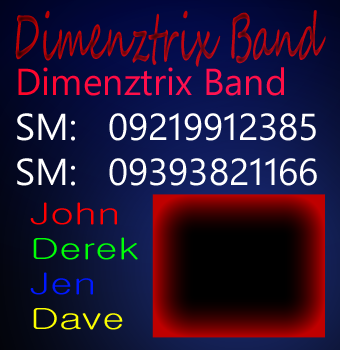
<style>
.page{position:relative;width:340px;height:350px}
.page>*{position:absolute;margin:0}
.t1{font:65.1px "SegoeScript";scale:0.5 1}
.t2{font:37.5px "SegoeUI";color:#ffffff}
.t3{font:37.5px "SegoeUI";color:#ff0000}
.t4{font:29.3px "Gulim";color:#00ff06;scale:1.38 1}
.t5{font:29.3px "Gulim";color:#ff0000;scale:1.38 1}
.t6{font:29.3px "Gulim";color:#0018ff;scale:1.38 1}
.t7{font:29.3px "Gulim";color:#fcff00;scale:1.38 1}
</style>
<div class="page">
<p class="t1" style="left:15px;top:10px;width:311px;height:57px">Dimenztrix Band</p>
<p class="t2" style="left:17px;top:67px;width:300px;height:119px"><span class="t3">Dimenztrix Band<br></span>SM:   09219912385<br>SM:   09393821166</p>
<p class="t4" style="left:30px;top:202px;width:108px;height:128px"><span class="t5">John<br></span>Derek<br><span class="t6">Jen<br></span><span class="t7">Dave</span></p>
</div>
